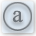
<style>
.page{position:relative;width:36px;height:36px}
.page>*{position:absolute;margin:0}
.t1{font:24px "TimesNewRomanPSMT";color:#6d7379}
</style>
<div class="page">
<p class="t1" style="left:12px;top:10px;width:11px;height:13px">a</p>
</div>
